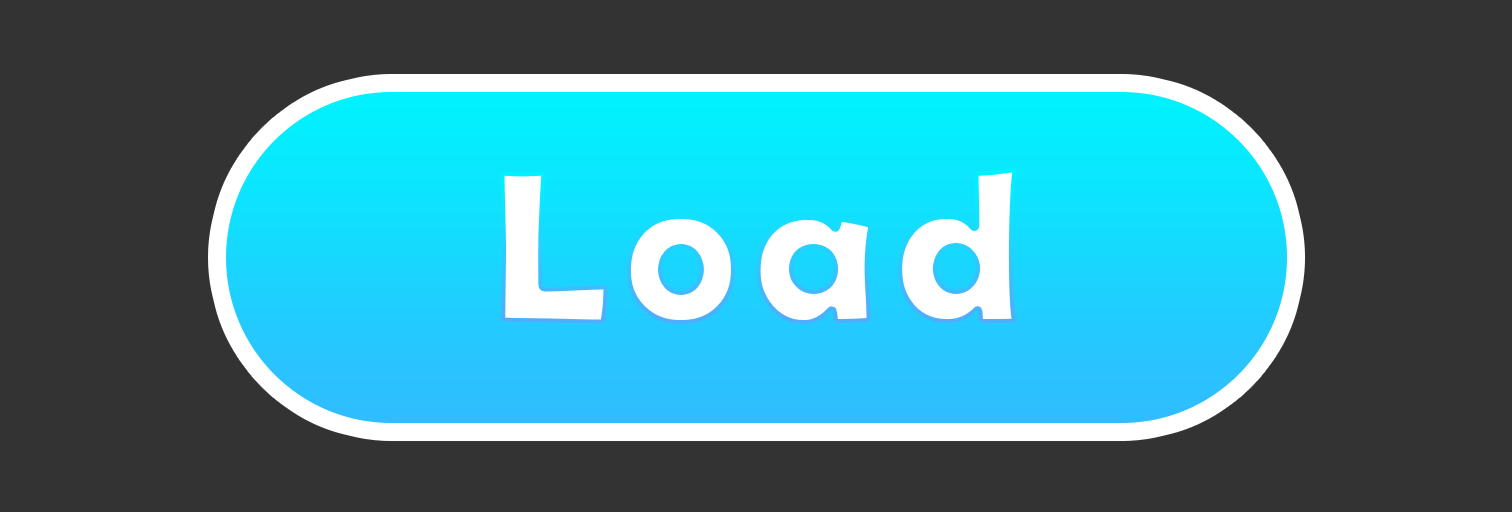
<style>
.page{position:relative;width:1512px;height:512px;background:#333333}
.page>*{position:absolute;margin:0}
.t1{font:218.9px "BerlinSansFBDemi-Bold";letter-spacing:0.06em;color:#ffffff}
</style>
<div class="page">
<p class="t1" style="left:500px;top:168px;width:517px;height:156px">Load</p>
</div>
